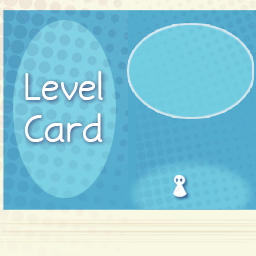
<style>
.page{position:relative;width:256px;height:256px}
.page>*{position:absolute;margin:0}
.t1{font:35px "Torid";color:#ffffff}
</style>
<div class="page">
<p class="t1" style="left:25px;top:71px;width:78px;height:71px;text-align:center">Level<br>Card</p>
</div>
